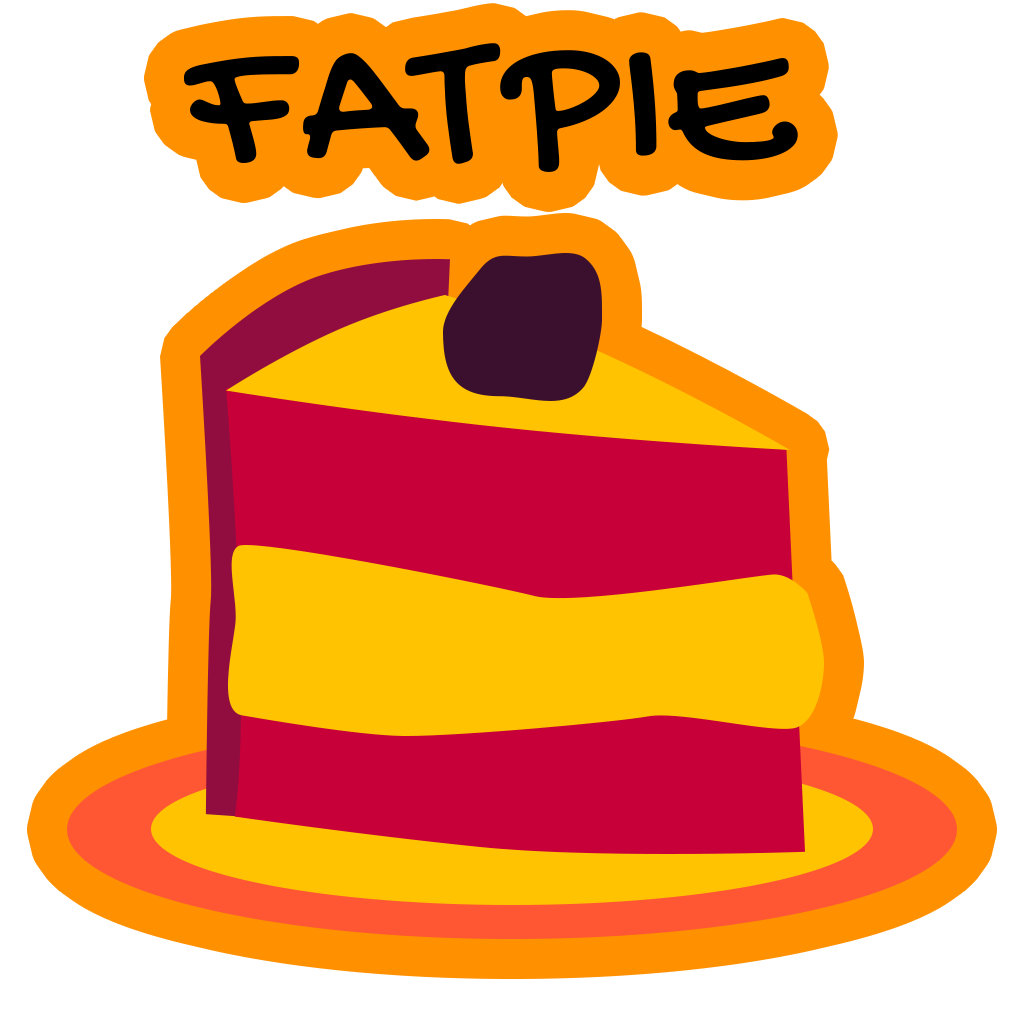
<style>
.page{position:relative;width:1024px;height:1024px;background:#ffffff}
.page>*{position:absolute;margin:0}
.t1{font:204px "GochiHandCyrillic";color:#000000}
</style>
<div class="page">
<p class="t1" style="left:184px;top:43px;width:614px;height:129px">FATPIE</p>
</div>
